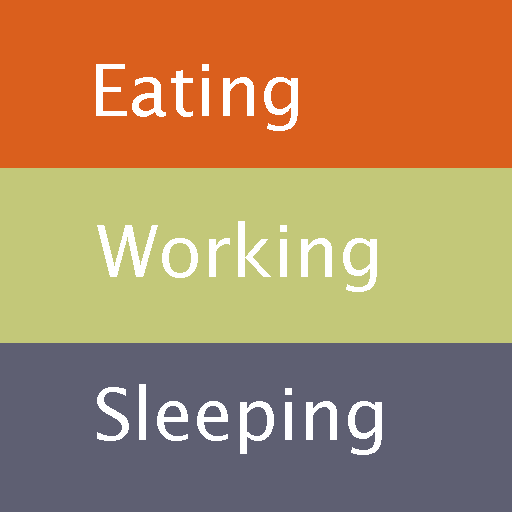
<style>
.page{position:relative;width:512px;height:512px;background:#c3c879}
.page>*{position:absolute;margin:0}
.t1{font:72px "LucidaSans";color:#ffffff}
</style>
<div class="page">
<p class="t1" style="left:96px;top:64px;width:202px;height:67px">Eating</p>
<p class="t1" style="left:97px;top:221px;width:280px;height:71px">Working</p>
<p class="t1" style="left:97px;top:384px;width:285px;height:71px">Sleeping</p>
</div>
